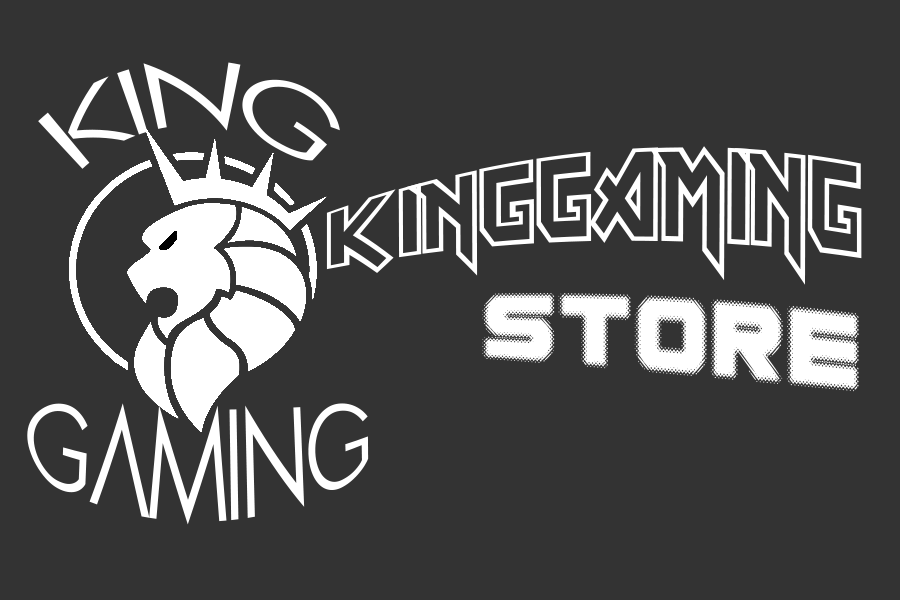
<style>
.page{position:relative;width:900px;height:600px;background:#333333}
.page>*{position:absolute;margin:0}
.t1{font:89px "Pasajero";color:#ffffff}
.t2{font:89px "Eddie";color:#ffffff}
.t3{font:89px "Spac3halftone";color:#ffffff}
</style>
<div class="page">
<p class="t1" style="left:38px;top:62px;width:302px;height:107px">KING</p>
<p class="t2" style="left:326px;top:146px;width:536px;height:246px;text-align:center">KINGGAMING<br><span class="t3">       STORE</span></p>
</div>
